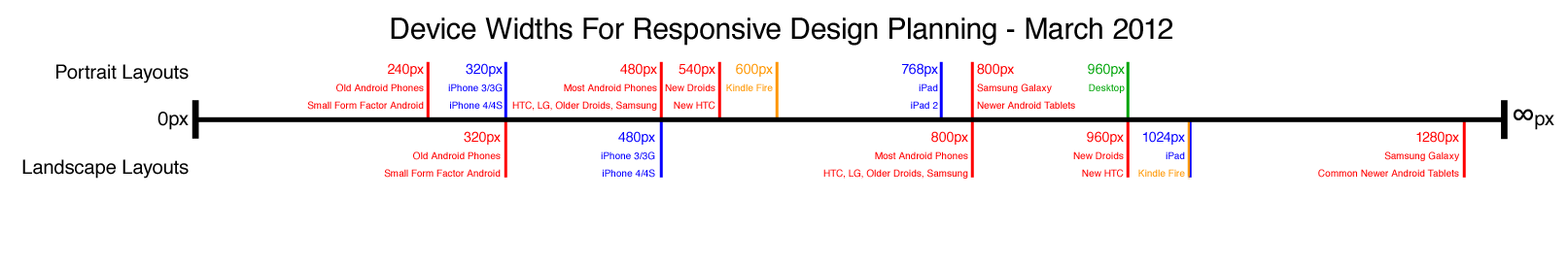
<style>
.page{position:relative;width:1568px;height:265px;background:#ffffff}
.page>*{position:absolute;margin:0}
.t1{font:29.2px "Helvetica";color:#000000}
.t2{font:19.4px "Helvetica";color:#000000}
.t3{font:9.7px/17.5px "Helvetica";color:#ff0000}
.t4{font:13.6px/17.5px "Helvetica";color:#ff0000}
.t5{font:9.7px/17.5px "Helvetica";color:#0600ff}
.t6{font:13.6px/17.5px "Helvetica";color:#0600ff}
.t7{font:9.7px/17.5px "Helvetica";color:#ff9600}
.t8{font:13.6px/17.5px "Helvetica";color:#ff9600}
.t9{font:9.7px/17.5px "Helvetica";color:#00a508}
.t10{font:13.6px/17.5px "Helvetica";color:#00a508}
</style>
<div class="page">
<p class="t1" style="left:391px;top:17px;width:781px;height:29px">Device Widths For Responsive Design Planning - March 2012</p>
<p class="t2" style="left:56px;top:64px;width:133px;height:20px">Portrait Layouts</p>
<p class="t3" style="left:307px;top:63px;width:117px;height:47px;text-align:right"><span class="t4">240px<br></span>Old Android Phones<br>Small Form Factor Android</p>
<p class="t5" style="left:448px;top:63px;width:55px;height:47px;text-align:right"><span class="t6">320px<br></span>iPhone 3/3G<br>iPhone 4/4S</p>
<p class="t3" style="left:512px;top:63px;width:145px;height:48px;text-align:right"><span class="t4">480px<br></span>Most Android Phones<br>HTC, LG, Older Droids, Samsung</p>
<p class="t3" style="left:665px;top:63px;width:50px;height:47px;text-align:right"><span class="t4">540px<br></span>New Droids<br>New HTC</p>
<p class="t7" style="left:726px;top:63px;width:47px;height:28px;text-align:right"><span class="t8">600px<br></span>Kindle Fire</p>
<p class="t5" style="left:902px;top:63px;width:36px;height:46px;text-align:right"><span class="t6">768px<br></span>iPad<br>iPad 2</p>
<p class="t3" style="left:977px;top:63px;width:98px;height:46px"><span class="t4">800px<br></span>Samsung Galaxy<br>Newer Android Tablets</p>
<p class="t9" style="left:1088px;top:63px;width:37px;height:30px;text-align:right"><span class="t10">960px<br></span>Desktop</p>
<p class="t2" style="left:157px;top:112px;width:32px;height:18px">0px</p>
<p class="t2" style="left:1514px;top:109px;width:40px;height:21px"><span class="t1">∞</span>px</p>
<p class="t3" style="left:384px;top:131px;width:117px;height:47px;text-align:right"><span class="t4">320px<br></span>Old Android Phones<br>Small Form Factor Android</p>
<p class="t5" style="left:601px;top:131px;width:54px;height:47px;text-align:right"><span class="t6">480px<br></span>iPhone 3/3G<br>iPhone 4/4S</p>
<p class="t3" style="left:823px;top:131px;width:145px;height:48px;text-align:right"><span class="t4">800px<br></span>Most Android Phones<br>HTC, LG, Older Droids, Samsung</p>
<p class="t3" style="left:1073px;top:131px;width:51px;height:47px;text-align:right"><span class="t4">960px<br></span>New Droids<br>New HTC</p>
<p class="t7" style="left:1138px;top:131px;width:47px;height:46px;text-align:right"><span class="t6">1024px<br></span><span class="t5">iPad<br></span>Kindle Fire</p>
<p class="t3" style="left:1318px;top:131px;width:141px;height:47px;text-align:right"><span class="t4">1280px<br></span>Samsung Galaxy<br>Common Newer Android Tablets</p>
<p class="t2" style="left:22px;top:159px;width:167px;height:20px">Landscape Layouts</p>
</div>
